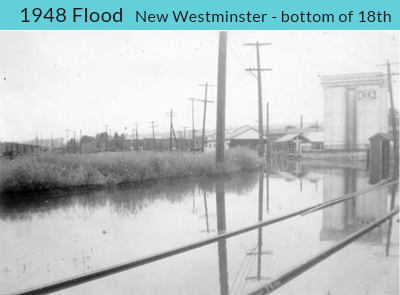
<style>
.page{position:relative;width:400px;height:295px}
.page>*{position:absolute;margin:0}
.t1{font:20px "Lato-Regular";letter-spacing:0.025em;color:#1a1a1a}
.t2{font:16px "Lato-Regular";letter-spacing:0.025em;color:#1a1a1a}
</style>
<div class="page">
<p class="t1" style="left:21px;top:8px;width:101px;height:14px">1948 Flood</p>
<p class="t2" style="left:136px;top:11px;width:255px;height:11px">New Westminster - bottom of 18th</p>
</div>
